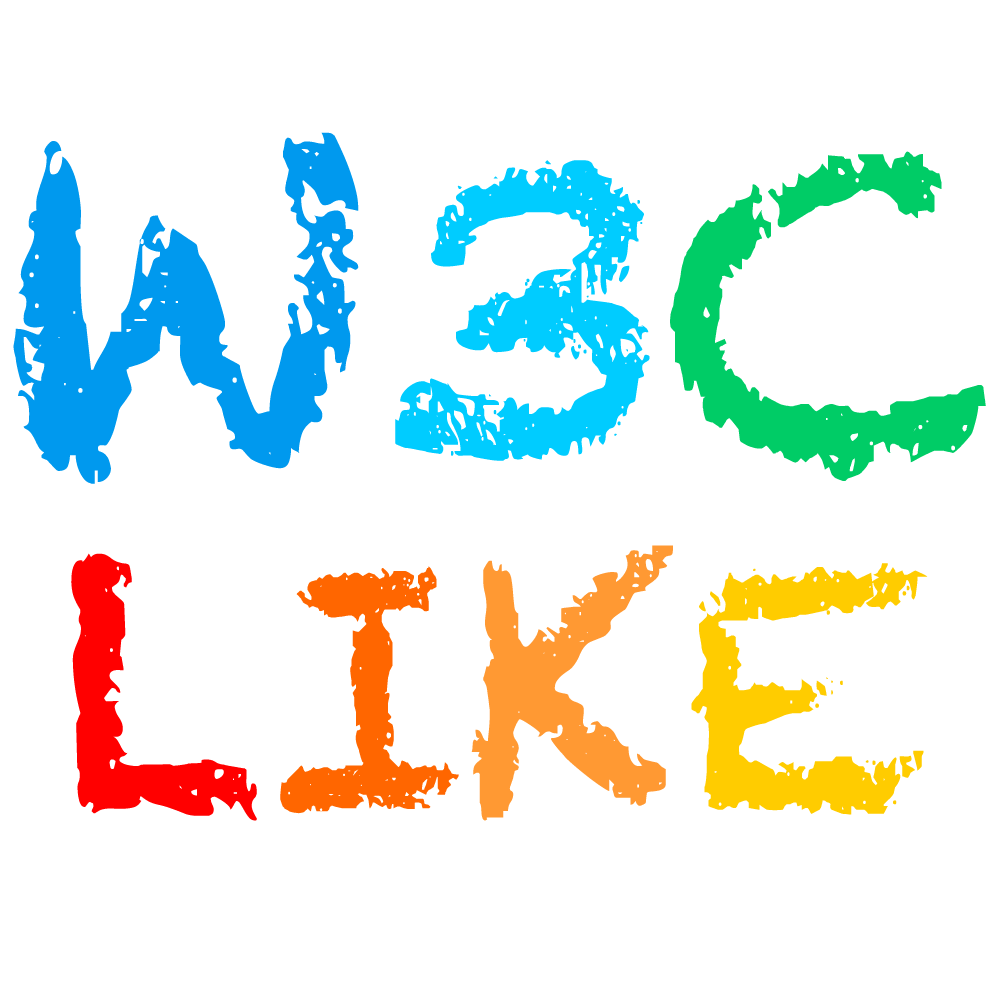
<style>
.page{position:relative;width:1000px;height:1000px;background:#ffffff}
.page>*{position:absolute;margin:0}
.t1{font:416.7px "Chalkduster";color:#0099ee}
.t2{font:416.7px "Chalkduster";color:#00ccff}
.t3{font:416.7px "Chalkduster";color:#00cc66}
.t4{font:333.3px "Chalkduster";color:#ff0000}
.t5{font:333.3px "Chalkduster";color:#ff6600}
.t6{font:333.3px "Chalkduster";color:#ff9933}
.t7{font:333.3px "Chalkduster";color:#ffcc00}
</style>
<div class="page">
<p class="t1" style="left:13px;top:132px;width:973px;height:352px">W<span class="t2">3</span><span class="t3">C</span></p>
<p class="t4" style="left:71px;top:545px;width:857px;height:276px">L<span class="t5">I</span><span class="t6">K</span><span class="t7">E</span></p>
</div>
